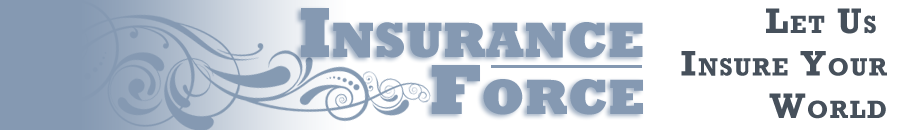
<style>
.page{position:relative;width:900px;height:130px;background:#ffffff}
.page>*{position:absolute;margin:0}
.t1{font:72px "Rockwell-ExtraBold";color:#8599b2;font-variant:small-caps}
.t2{font:36px/40.5px "Rockwell-Bold";letter-spacing:0.05em;color:#46505b;font-variant:small-caps}
</style>
<div class="page">
<p class="t1" style="left:301px;top:8px;width:342px;height:50px">Insurance</p>
<p class="t2" style="left:681px;top:8px;width:206px;height:111px;text-align:right">Let Us <br>Insure Your<br>World</p>
<p class="t1" style="left:431px;top:65px;width:212px;height:50px">Force</p>
</div>
